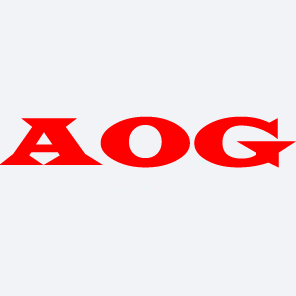
<style>
.page{position:relative;width:296px;height:296px;background:#f2f3f7}
.page>*{position:absolute;margin:0}
.t1{font:70px "LatinWide";color:#ff0000}
</style>
<div class="page">
<p class="t1" style="left:0px;top:116px;width:296px;height:52px">AOG</p>
</div>
